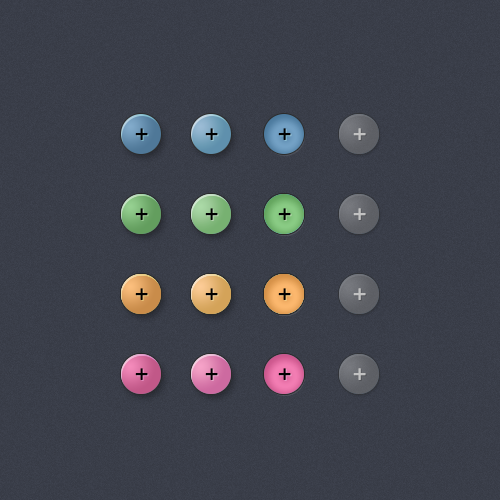
<style>
.page{position:relative;width:500px;height:500px}
.page>*{position:absolute;margin:0}
.t1{font:22px "CenturyGothic";letter-spacing:0.1em;color:#000000;font-weight:bold}
.t2{font:22px "CenturyGothic";letter-spacing:0.1em;color:#c2c2c2;font-weight:bold}
</style>
<div class="page">
<p class="t1" style="left:135px;top:128px;width:13px;height:12px">+</p>
<p class="t1" style="left:205px;top:128px;width:13px;height:12px">+</p>
<p class="t1" style="left:278px;top:128px;width:13px;height:12px">+</p>
<p class="t2" style="left:353px;top:128px;width:13px;height:12px">+</p>
<p class="t1" style="left:135px;top:208px;width:13px;height:12px">+</p>
<p class="t1" style="left:205px;top:208px;width:13px;height:12px">+</p>
<p class="t1" style="left:278px;top:208px;width:13px;height:12px">+</p>
<p class="t2" style="left:353px;top:208px;width:13px;height:12px">+</p>
<p class="t1" style="left:135px;top:288px;width:13px;height:12px">+</p>
<p class="t1" style="left:205px;top:288px;width:13px;height:12px">+</p>
<p class="t1" style="left:278px;top:288px;width:13px;height:12px">+</p>
<p class="t2" style="left:353px;top:288px;width:13px;height:12px">+</p>
<p class="t1" style="left:135px;top:368px;width:13px;height:12px">+</p>
<p class="t1" style="left:205px;top:368px;width:13px;height:12px">+</p>
<p class="t1" style="left:278px;top:368px;width:13px;height:12px">+</p>
<p class="t2" style="left:353px;top:368px;width:13px;height:12px">+</p>
</div>
